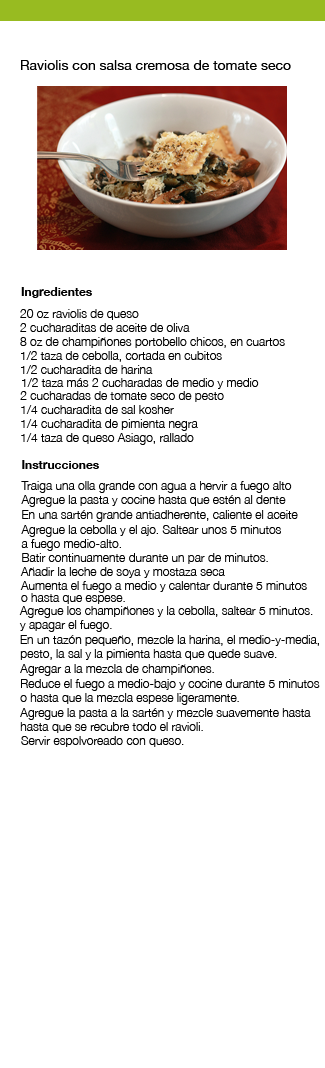
<style>
.page{position:relative;width:325px;height:1068px;background:#ffffff}
.page>*{position:absolute;margin:0}
.t1{font:14px "HelveticaNeue";color:#000000}
.t2{font:12px "HelveticaNeue-Bold";color:#000000}
.t3{font:12px "HelveticaNeue-Light";color:#000000}
</style>
<div class="page">
<p class="t1" style="left:21px;top:60px;width:270px;height:10px">Raviolis con salsa cremosa de tomate seco</p>
<p class="t2" style="left:21px;top:287px;width:71px;height:11px">Ingredientes</p>
<p class="t3" style="left:20px;top:309px;width:119px;height:11px">20 oz raviolis de queso</p>
<p class="t3" style="left:20px;top:323px;width:170px;height:9px">2 cucharaditas de aceite de oliva</p>
<p class="t3" style="left:20px;top:337px;width:265px;height:11px">8 oz de champiñones portobello chicos, en cuartos</p>
<p class="t3" style="left:21px;top:351px;width:201px;height:11px">1/2 taza de cebolla, cortada en cubitos</p>
<p class="t3" style="left:21px;top:365px;width:132px;height:9px">1/2 cucharadita de harina</p>
<p class="t3" style="left:22px;top:378px;width:237px;height:11px">1/2 taza más 2 cucharadas de medio y medio</p>
<p class="t3" style="left:20px;top:391px;width:204px;height:11px">2 cucharadas de tomate seco de pesto</p>
<p class="t3" style="left:21px;top:405px;width:153px;height:9px">1/4 cucharadita de sal kosher</p>
<p class="t3" style="left:21px;top:419px;width:177px;height:12px">1/4 cucharadita de pimienta negra</p>
<p class="t3" style="left:21px;top:433px;width:173px;height:12px">1/4 taza de queso Asiago, rallado</p>
<p class="t2" style="left:22px;top:460px;width:77px;height:9px">Instrucciones</p>
<p class="t3" style="left:21px;top:481px;width:271px;height:12px">Traiga una olla grande con agua a hervir a fuego alto</p>
<p class="t3" style="left:21px;top:495px;width:265px;height:12px">Agregue la pasta y cocine hasta que estén al dente</p>
<p class="t3" style="left:22px;top:510px;width:276px;height:12px">En una sartén grande antiadherente, caliente el aceite</p>
<p class="t3" style="left:21px;top:525px;width:260px;height:12px">Agregue la cebolla y el ajo. Saltear unos 5 minutos</p>
<p class="t3" style="left:21px;top:539px;width:100px;height:12px">a fuego medio-alto.</p>
<p class="t3" style="left:22px;top:553px;width:246px;height:11px">Batir continuamente durante un par de minutos.</p>
<p class="t3" style="left:20px;top:567px;width:205px;height:11px">Añadir la leche de soya y mostaza seca</p>
<p class="t3" style="left:20px;top:581px;width:287px;height:12px">Aumenta el fuego a medio y calentar durante 5 minutos</p>
<p class="t3" style="left:21px;top:593px;width:104px;height:11px">o hasta que espese.</p>
<p class="t3" style="left:19px;top:606px;width:294px;height:12px">Agregue los champiñones y la cebolla, saltear 5 minutos.</p>
<p class="t3" style="left:19px;top:620px;width:93px;height:12px">y apagar el fuego.</p>
<p class="t3" style="left:20px;top:635px;width:299px;height:11px">En un tazón pequeño, mezcle la harina, el medio-y-media,</p>
<p class="t3" style="left:20px;top:649px;width:257px;height:11px">pesto, la sal y la pimienta hasta que quede suave.</p>
<p class="t3" style="left:20px;top:664px;width:194px;height:12px">Agregar a la mezcla de champiñones.</p>
<p class="t3" style="left:21px;top:679px;width:299px;height:12px">Reduce el fuego a medio-bajo y cocine durante 5 minutos</p>
<p class="t3" style="left:20px;top:693px;width:219px;height:12px">o hasta que la mezcla espese ligeramente.</p>
<p class="t3" style="left:20px;top:708px;width:291px;height:12px">Agregue la pasta a la sartén y mezcle suavemente hasta</p>
<p class="t3" style="left:20px;top:722px;width:183px;height:11px">hasta que se recubre todo el ravioli.</p>
<p class="t3" style="left:21px;top:736px;width:163px;height:11px">Servir espolvoreado con queso.</p>
</div>
